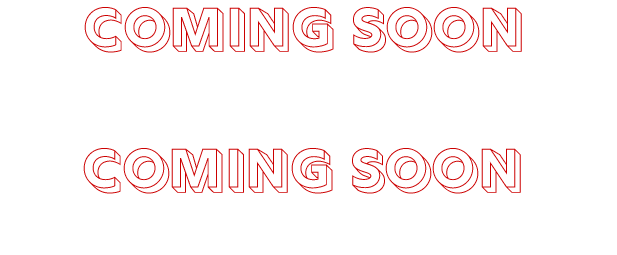
<style>
.page{position:relative;width:617px;height:255px;background:#ffffff}
.page>*{position:absolute;margin:0}
.t1{font:60px "Rig-BoldOutline";color:#cc0000}
</style>
<div class="page">
<p class="t1" style="left:84px;top:7px;width:438px;height:46px">coming soon</p>
<p class="t1" style="left:83px;top:148px;width:438px;height:46px">coming soon</p>
</div>
